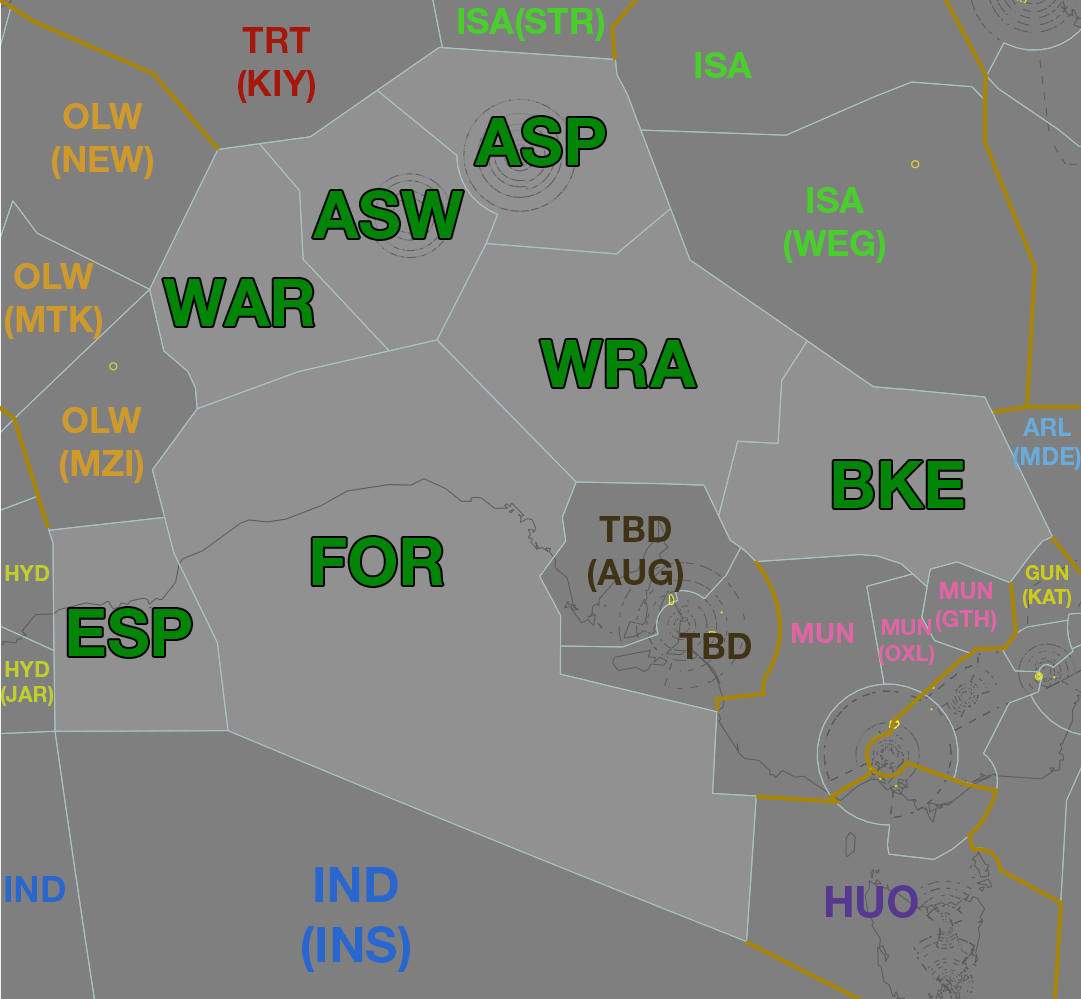
<style>
.page{position:relative;width:1081px;height:999px;background:#7f7f7f}
.page>*{position:absolute;margin:0}
.t1{font:35.6px "HelveticaNeueLTStd-Bd";color:#48cf29}
.t2{font:35.6px "HelveticaNeueLTStd-Bd";color:#a7160b}
.t3{font:35.6px "HelveticaNeueLTStd-Bd";color:#cf9a29}
.t4{font:65.8px "HelveticaNeueLTStd-Bd";color:#008506}
.t5{font:24.1px "HelveticaNeueLTStd-Bd";color:#67acdc}
.t6{font:35.6px "HelveticaNeueLTStd-Bd";color:#3f3215}
.t7{font:21.2px "HelveticaNeueLTStd-Bd";color:#c1cf29}
.t8{font:20px "HelveticaNeueLTStd-Bd";color:#cecc13}
.t9{font:23.1px "HelveticaNeueLTStd-Bd";color:#e264a5}
.t10{font:27.2px "HelveticaNeueLTStd-Bd";color:#e264a5}
.t11{font:21.6px "HelveticaNeueLTStd-Bd";color:#e264a5}
.t12{font:35.6px "HelveticaNeueLTStd-Bd";color:#403214}
.t13{font:49.5px "HelveticaNeueLTStd-Bd";color:#2967cf}
.t14{font:35.6px "HelveticaNeueLTStd-Bd";color:#2967cf}
.t15{font:43px "HelveticaNeueLTStd-Bd";color:#573890}
</style>
<div class="page">
<p class="t1" style="left:458px;top:8px;width:146px;height:33px">ISA(STR)</p>
<p class="t2" style="left:238px;top:27px;width:77px;height:76px;text-align:center">TRT<br>(KIY)</p>
<p class="t1" style="left:695px;top:52px;width:57px;height:26px">ISA</p>
<p class="t3" style="left:52px;top:103px;width:101px;height:76px;text-align:center">OLW<br>(NEW)</p>
<p class="t4" style="left:475px;top:117px;width:130px;height:49px">ASP</p>
<p class="t4" style="left:313px;top:190px;width:150px;height:49px">ASW</p>
<p class="t1" style="left:784px;top:187px;width:101px;height:76px;text-align:center">ISA<br>(WEG)</p>
<p class="t3" style="left:5px;top:263px;width:97px;height:76px;text-align:center">OLW<br>(MTK)</p>
<p class="t4" style="left:163px;top:279px;width:151px;height:47px">WAR</p>
<p class="t4" style="left:540px;top:340px;width:156px;height:47px">WRA</p>
<p class="t3" style="left:60px;top:407px;width:83px;height:76px;text-align:center">OLW<br>(MZI)</p>
<p class="t5" style="left:1013px;top:418px;width:68px;height:52px;text-align:center">ARL<br>(MDE)</p>
<p class="t4" style="left:833px;top:461px;width:131px;height:47px">BKE</p>
<p class="t6" style="left:588px;top:516px;width:95px;height:76px;text-align:center">TBD<br>(AUG)</p>
<p class="t4" style="left:312px;top:537px;width:131px;height:49px">FOR</p>
<p class="t7" style="left:5px;top:565px;width:44px;height:16px">HYD</p>
<p class="t8" style="left:1023px;top:565px;width:48px;height:43px;text-align:center">GUN<br>(KAT)</p>
<p class="t9" style="left:936px;top:582px;width:60px;height:50px;text-align:center">MUN<br>(GTH)</p>
<p class="t4" style="left:68px;top:608px;width:123px;height:49px">ESP</p>
<p class="t10" style="left:792px;top:623px;width:61px;height:20px">MUN</p>
<p class="t11" style="left:879px;top:619px;width:55px;height:46px;text-align:center">MUN<br>(OXL)</p>
<p class="t12" style="left:679px;top:633px;width:72px;height:26px">TBD</p>
<p class="t7" style="left:1px;top:661px;width:52px;height:45px;text-align:center">HYD<br>(JAR)</p>
<p class="t13" style="left:302px;top:867px;width:108px;height:105px;text-align:center">IND<br>(INS)</p>
<p class="t14" style="left:5px;top:876px;width:60px;height:26px">IND</p>
<p class="t15" style="left:826px;top:885px;width:92px;height:33px">HUO</p>
</div>
